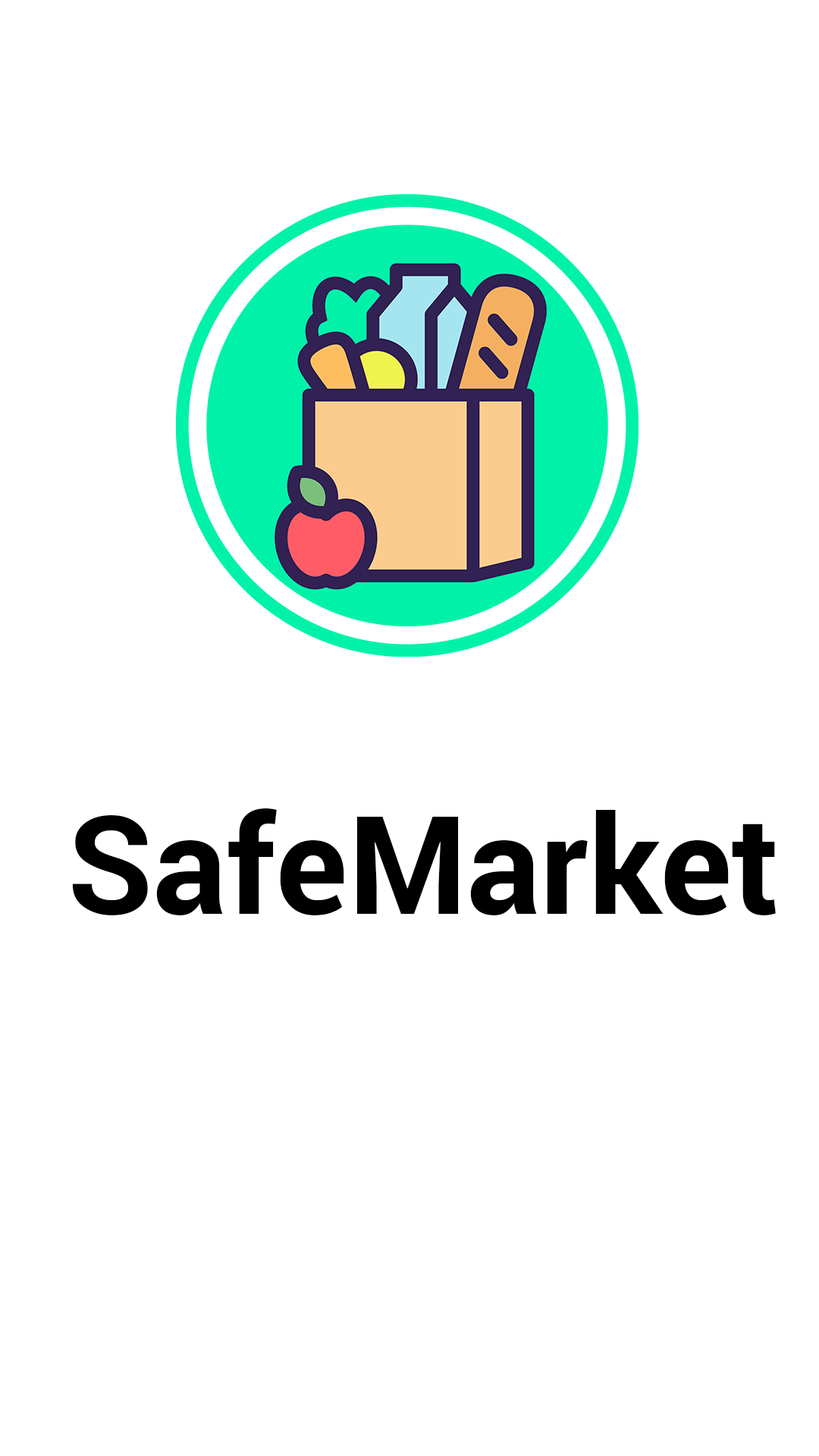
<style>
.page{position:relative;width:819px;height:1456px;background:#ffffff}
.page>*{position:absolute;margin:0}
.t1{font:136.5px "Roboto-Bold";color:#000000}
</style>
<div class="page">
<p class="t1" style="left:72px;top:808px;width:704px;height:107px">SafeMarket</p>
</div>
